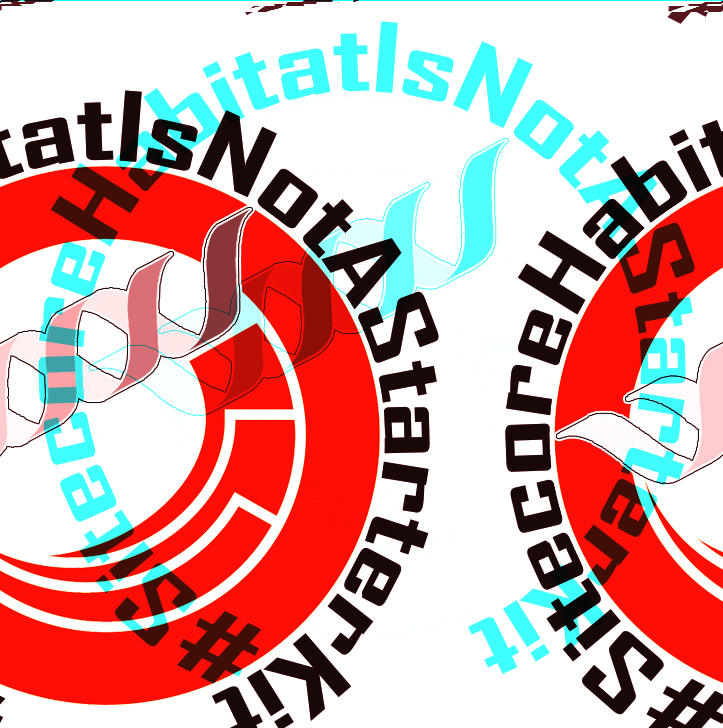
<style>
.page{position:relative;width:723px;height:728px;background:#ffffff}
.page>*{position:absolute;margin:0}
.t1{font:91.7px "AgencyFB-Bold";letter-spacing:-0.025em;scale:1.57 1}
</style>
<div class="page">
<p class="t1" style="left:38px;top:20px;width:657px;height:663px;rotate:-140deg">#SitecoreHabitatIsNotAStarterKit</p>
</div>
